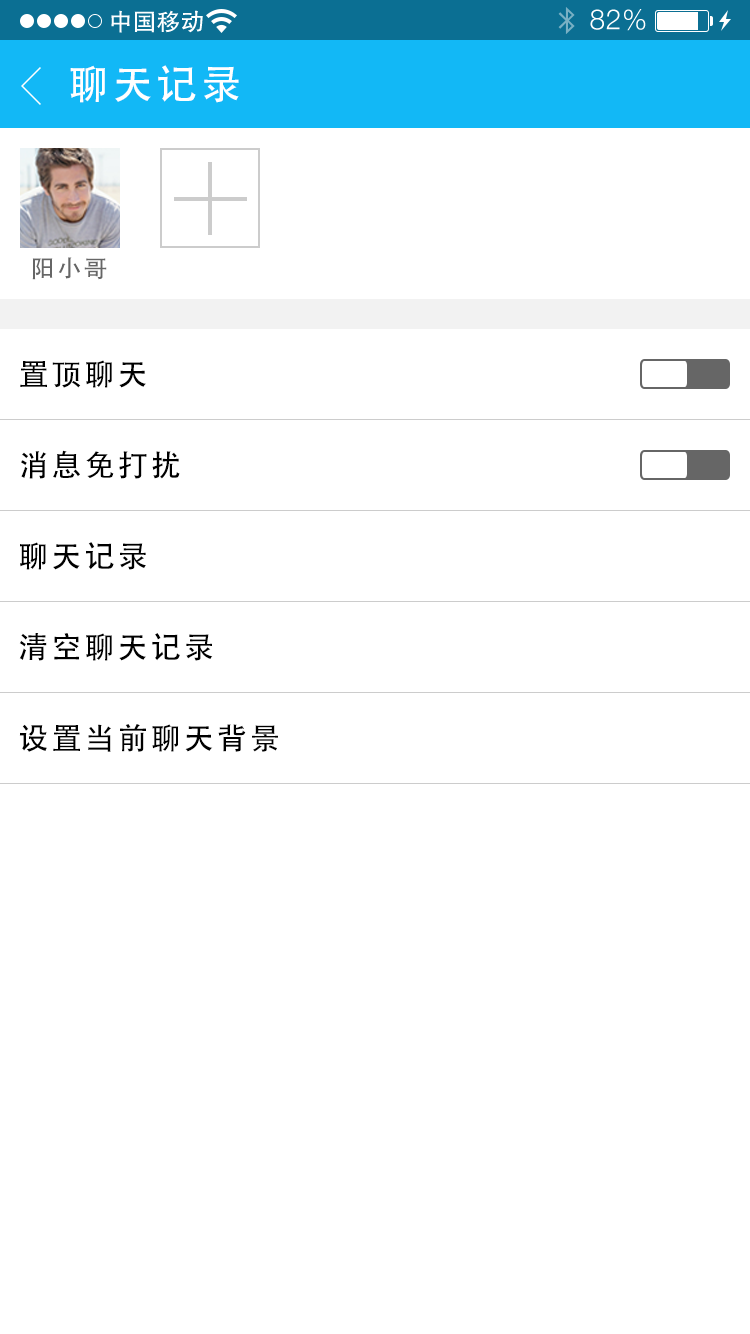
<style>
.page{position:relative;width:750px;height:1334px;background:#ffffff}
.page>*{position:absolute;margin:0}
.t1{font:40px "AdobeHeitiStd-Regular";letter-spacing:0.104em;color:#ffffff}
.t2{font:24px "AdobeHeitiStd-Regular";letter-spacing:0.104em;color:#666666}
.t3{font:30px "AdobeHeitiStd-Regular";letter-spacing:0.104em;color:#000000}
</style>
<div class="page">
<p class="t1" style="left:70px;top:65px;width:169px;height:38px">聊天记录</p>
<p class="t2" style="left:32px;top:257px;width:75px;height:23px">阳小哥</p>
<p class="t3" style="left:20px;top:360px;width:126px;height:28px">置顶聊天</p>
<p class="t3" style="left:21px;top:450px;width:159px;height:29px">消息免打扰</p>
<p class="t3" style="left:20px;top:542px;width:126px;height:28px">聊天记录</p>
<p class="t3" style="left:19px;top:633px;width:194px;height:28px">清空聊天记录</p>
<p class="t3" style="left:19px;top:724px;width:259px;height:28px">设置当前聊天背景</p>
</div>
